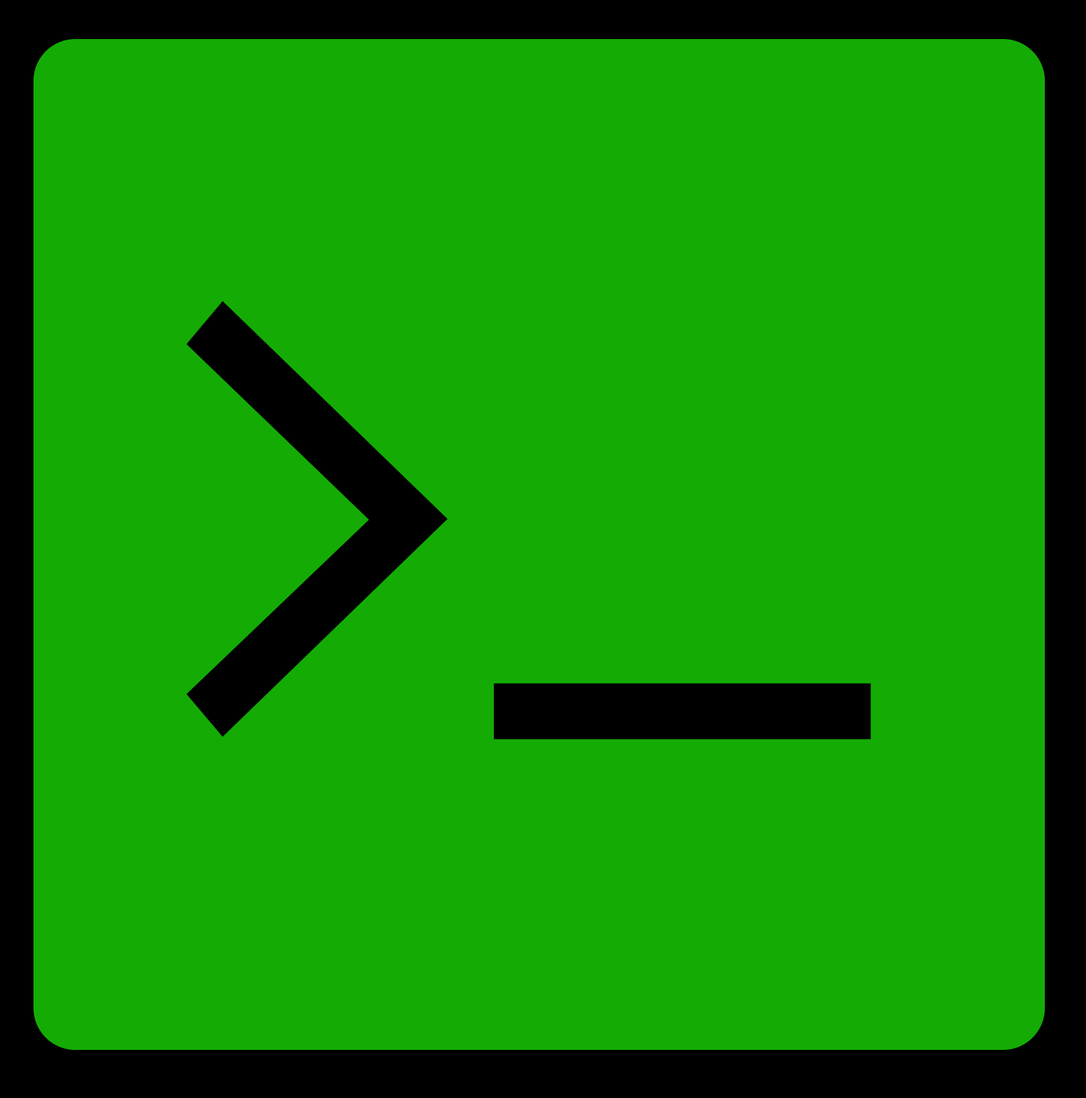
<style>
.page{position:relative;width:1086px;height:1098px;background:#14ac04}
.page>*{position:absolute;margin:0}
.t1{font:685.7px "Consolas-Bold";color:#000000}
.t2{font:795.4px "Consolas";color:#000000;scale:0.86 1}
</style>
<div class="page">
<p class="t1" style="left:186px;top:301px;width:685px;height:439px"><span class="t2">&gt;_</span>v<br>v</p>
</div>
